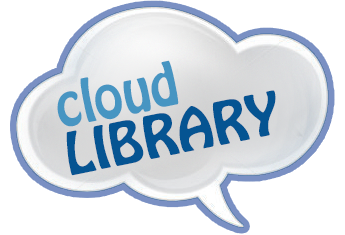
<style>
.page{position:relative;width:345px;height:235px;background:#ffffff}
.page>*{position:absolute;margin:0}
.t1{font:52.1px "HoboStd";color:#4795c2}
.t2{font:52.1px "HoboStd";color:#055492}
</style>
<div class="page">
<p class="t1" style="left:57px;top:60px;width:122px;height:67px;rotate:-11deg">cloud</p>
<p class="t2" style="left:66px;top:90px;width:210px;height:86px;rotate:-11deg">LIBRARY</p>
</div>
